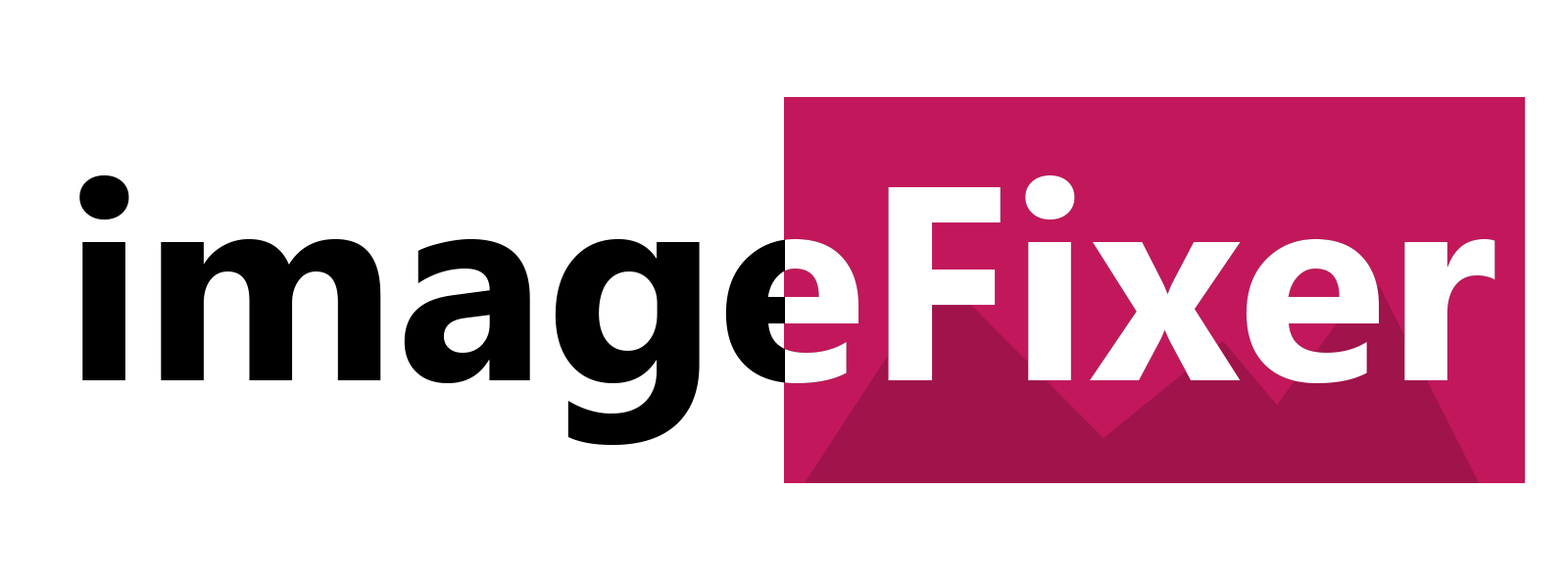
<style>
.page{position:relative;width:1568px;height:588px;background:#ffffff}
.page>*{position:absolute;margin:0}
.t1{font:276.6px "SegoeUI-Bold"}
</style>
<div class="page">
<p class="t1" style="left:79px;top:175px;width:1416px;height:270px">imageFixer</p>
</div>
